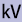
<style>
.page{position:relative;width:22px;height:22px;background:#bdbede}
.page>*{position:absolute;margin:0}
.t1{font:18px "AdobeHeitiStd-Regular";color:#000000}
</style>
<div class="page">
<p class="t1" style="left:2px;top:3px;width:20px;height:16px">kV</p>
</div>
